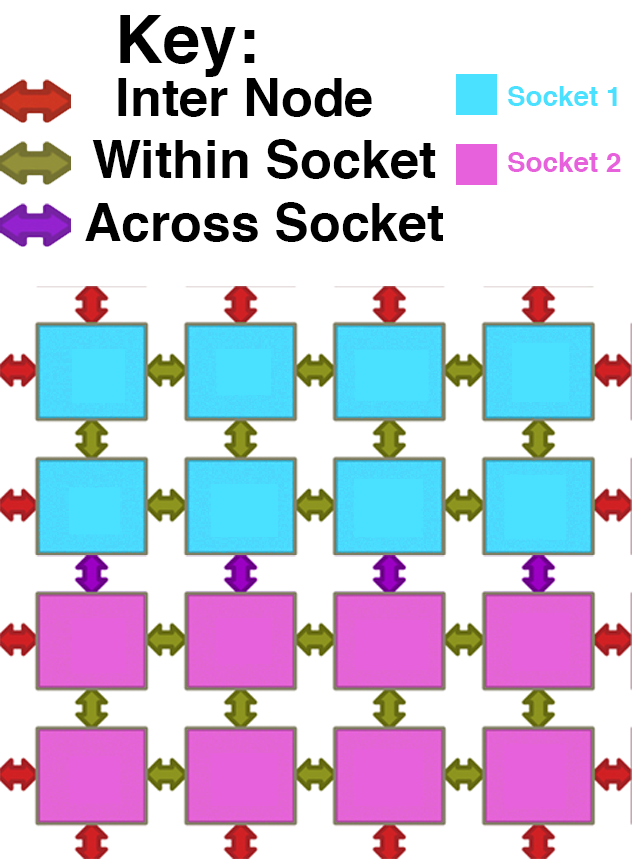
<style>
.page{position:relative;width:632px;height:859px;background:#ffffff}
.page>*{position:absolute;margin:0}
.t1{font:66.3px "Helvetica-Bold";color:#000000}
.t2{font:52.1px "Helvetica-Bold";color:#000000}
.t3{font:27.9px "Helvetica-Bold";color:#49e1ff}
.t4{font:27.9px "Helvetica-Bold";color:#e661db}
.t5{font:51.9px "Helvetica-Bold";color:#000000}
</style>
<div class="page">
<p class="t1" style="left:120px;top:15px;width:135px;height:62px">Key:</p>
<p class="t2" style="left:118px;top:78px;width:254px;height:39px">Inter Node</p>
<p class="t3" style="left:508px;top:86px;width:109px;height:20px">Socket 1</p>
<p class="t2" style="left:92px;top:139px;width:344px;height:40px">Within Socket</p>
<p class="t4" style="left:508px;top:152px;width:113px;height:20px">Socket 2</p>
<p class="t5" style="left:85px;top:202px;width:358px;height:40px">Across Socket</p>
</div>
